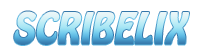
<style>
.page{position:relative;width:200px;height:55px;background:#ffffff}
.page>*{position:absolute;margin:0}
.t1{font:38.6px "HoboStd";letter-spacing:-0.005em;font-weight:bold;font-style:italic;scale:0.85 1}
</style>
<div class="page">
<p class="t1" style="left:14px;top:11px;width:175px;height:34px">SCRIBELIX</p>
</div>
